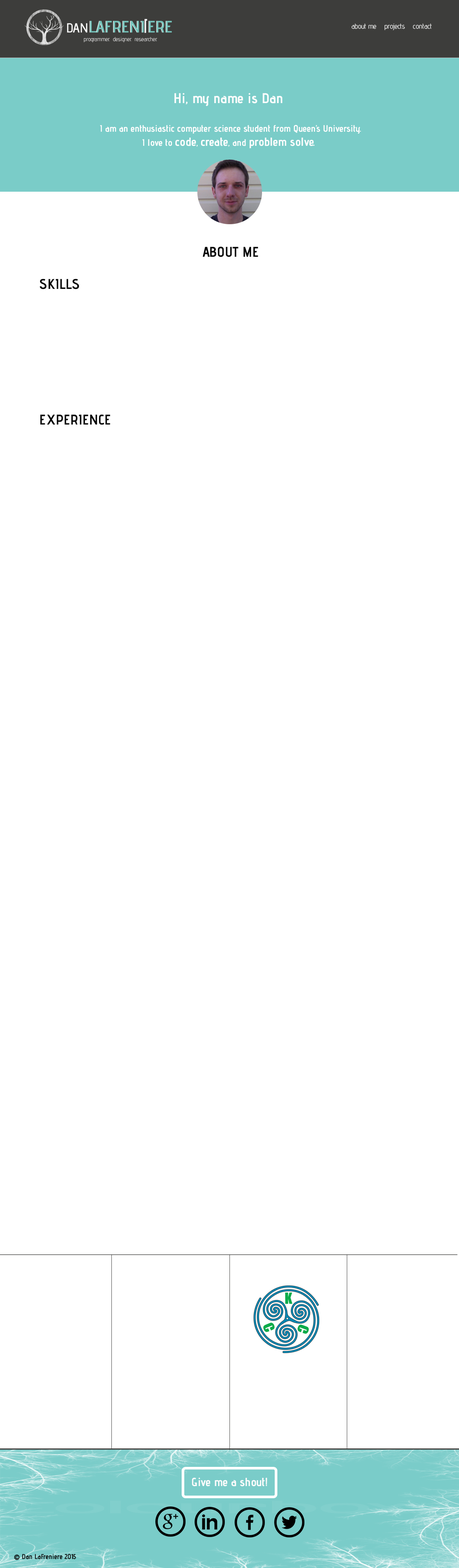
<style>
.page{position:relative;width:459px;height:1568px;background:#ffffff}
.page>*{position:absolute;margin:0}
.t1{font:7.1px "AdventPro-Regular";color:#fdfdfd}
.t2{font:14.1px "AdventPro-Bold";color:#fdfdfd}
.t3{font:9.4px "AdventPro-Bold";color:#fdfdfd}
.t4{font:9.4px "AdventPro-Bold";color:#ffffff}
.t5{font:11.8px "AdventPro-Bold";color:#ffffff}
.t6{font:11.8px "AdventPro-Bold";color:#fdfdfd}
.t7{font:14.1px "AdventPro-Bold";color:#030303}
.t8{font:11.8px "AdventPro-Bold";color:#fdfcfc}
.t9{font:7.1px "AdventPro-Bold";color:#060606}
</style>
<div class="page">
<p class="t1" style="left:351px;top:24px;width:81px;height:6px">about me    projects    contact</p>
<p class="t2" style="left:174px;top:93px;width:108px;height:13px">Hi, my name is Dan</p>
<p class="t3" style="left:100px;top:125px;width:261px;height:24px">I am an enthusiastic computer science student from Queen’s University.  <br><span class="t4">    I love to </span><span class="t5">code</span>, <span class="t5">create</span>, and <span class="t6">problem solve.</span></p>
<p class="t7" style="left:202px;top:247px;width:56px;height:10px">ABOUT ME</p>
<p class="t7" style="left:40px;top:279px;width:39px;height:10px">SKILLS</p>
<p class="t7" style="left:40px;top:414px;width:70px;height:11px">EXPERIENCE</p>
<p class="t8" style="left:192px;top:1477px;width:75px;height:9px">Give me a shout!</p>
<p class="t9" style="left:14px;top:1554px;width:62px;height:6px">© Dan LaFreniere 2015</p>
</div>
